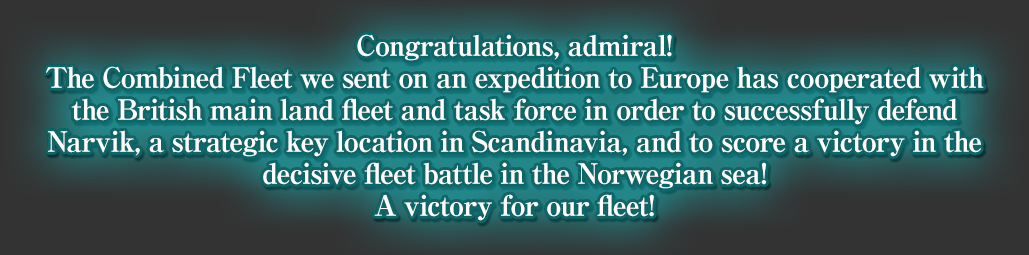
<style>
.page{position:relative;width:1029px;height:255px}
.page>*{position:absolute;margin:0}
.t1{font:28px/32px "RyuminPro-ExBold";letter-spacing:-0.04em;color:#ffffff}
</style>
<div class="page">
<p class="t1" style="left:46px;top:34px;width:938px;height:187px;text-align:center">Congratulations, admiral!<br>The Combined Fleet we sent on an expedition to Europe has cooperated with<br>the British main land fleet and task force in order to successfully defend<br>Narvik, a strategic key location in Scandinavia, and to score a victory in the<br>decisive fleet battle in the Norwegian sea!<br>A victory for our fleet!</p>
</div>
